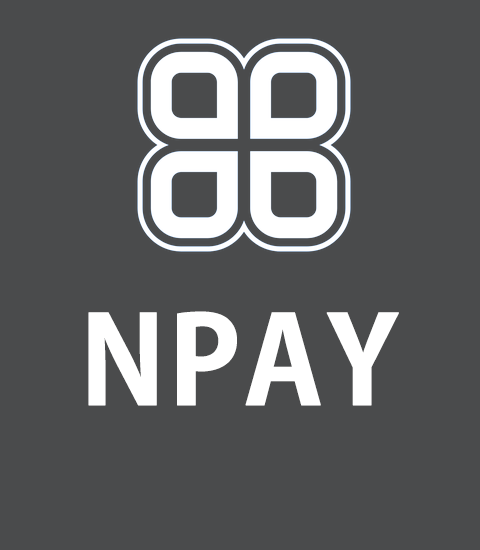
<style>
.page{position:relative;width:480px;height:550px;background:#4a4b4c}
.page>*{position:absolute;margin:0}
.t1{font:120px "AdobeGothicStd-Bold";color:#fefeff;font-weight:bold}
</style>
<div class="page">
<p class="t1" style="left:88px;top:311px;width:311px;height:95px">NPAY</p>
</div>
